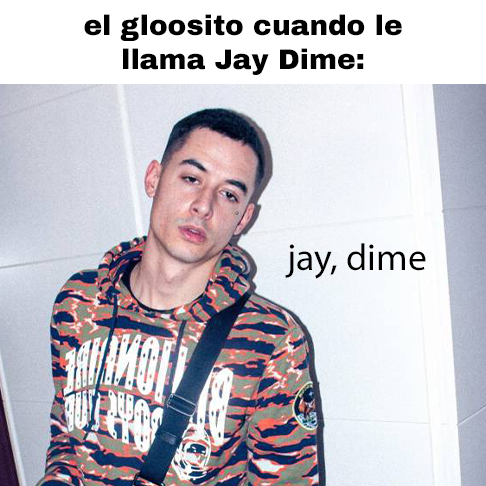
<style>
.page{position:relative;width:486px;height:486px}
.page>*{position:absolute;margin:0}
.t1{font:28px "ArchivoBlack-Regular";color:#000000}
.t2{font:37.8px "MyriadPro-Regular";color:#000000}
</style>
<div class="page">
<p class="t1" style="left:84px;top:14px;width:318px;height:61px;text-align:center">el gloosito cuando le<br>llama Jay Dime:</p>
<p class="t2" style="left:285px;top:243px;width:141px;height:36px">jay, dime</p>
</div>
